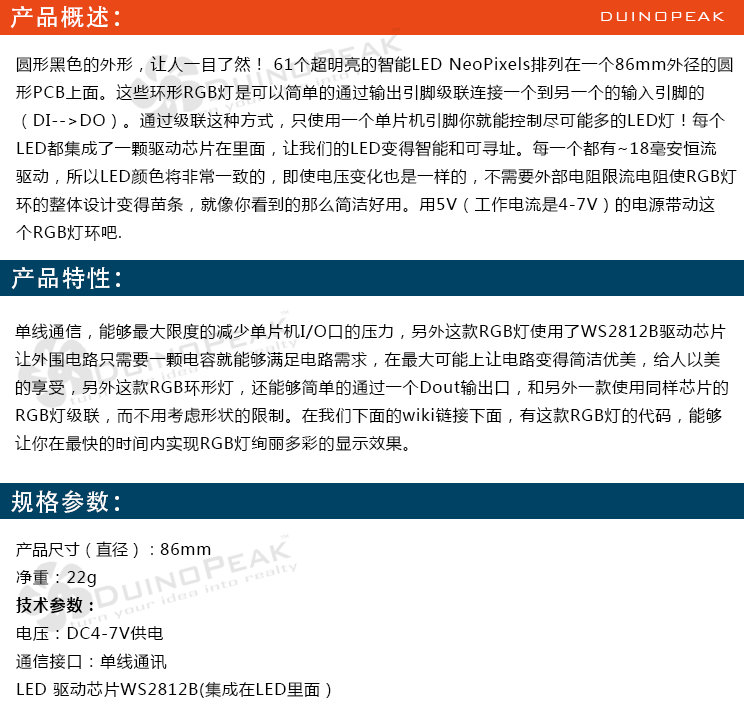
<style>
.page{position:relative;width:744px;height:706px;background:#ffffff}
.page>*{position:absolute;margin:0}
.t1{font:24px "AdobeHeitiStd-Regular";letter-spacing:0.05em;color:#ffffff}
.t2{font:18px "BankGothicBT-Light";letter-spacing:0.05em;color:#ffffff}
.t3{font:16px "MicrosoftYaHei";letter-spacing:0.05em;color:#000000}
.t4{font:16px "MicrosoftYaHei";color:#000000}
.t5{font:16px "MicrosoftYaHei-Bold";letter-spacing:0.05em;color:#000000}
</style>
<div class="page">
<p class="t1" style="left:10px;top:6px;width:109px;height:23px">产品概述：</p>
<p class="t2" style="left:601px;top:12px;width:124px;height:9px">DUINOPEAK</p>
<p class="t3" style="left:16px;top:56px;width:721px;height:185px">圆形黑色的外形，让人一目了然！ 61个超明亮的智能LED NeoPixels排列在一个86mm外径的圆<br>形PCB上面。这些环形RGB灯是可以简单的通过输出引脚级联连接一个到另一个的输入引脚的<br>（DI--&gt;DO）。通过级联这种方式，只使用一个单片机引脚你就能控制尽可能多的LED灯！每个<br>LED都集成了一颗驱动芯片在里面，让我们的LED变得智能和可寻址。每一个都有~18毫安恒流<br>驱动，所以LED颜色将非常一致的，即使电压变化也是一样的，不需要外部电阻限流电阻使RGB灯<br>环的整体设计变得苗条，就像你看到的那么简洁好用。用5V（工作电流是4-7V）的电源带动这<br>个RGB灯环吧.</p>
<p class="t1" style="left:11px;top:266px;width:109px;height:24px">产品特性：</p>
<p class="t3" style="left:15px;top:323px;width:713px;height:129px">单线通信，能够最大限度的减少单片机I/O口的压力，另外这款RGB灯使用了WS2812B驱动芯片<br>让外围电路只需要一颗电容就能够满足电路需求，在最大可能上让电路变得简洁优美，给人以美<br>的享受，另外这款RGB环形灯，还能够简单的通过一个Dout输出口，和另外一款使用同样芯片的<br>RGB灯级联，而不用考虑形状的限制。在我们下面的wiki链接下面，有这款RGB灯的代码，能够<br>让你在最快的时间内实现RGB灯绚丽多彩的显示效果。</p>
<p class="t1" style="left:11px;top:490px;width:108px;height:23px">规格参数：</p>
<p class="t3" style="left:16px;top:541px;width:315px;height:157px"><span class="t4">产品尺寸（直径）：</span>86mm<br>净重：22g<br><span class="t5">技术参数：<br></span>电压：DC4-7V供电<br>通信接口：单线通讯<br>LED 驱动芯片WS2812B(集成在LED里面）</p>
</div>
